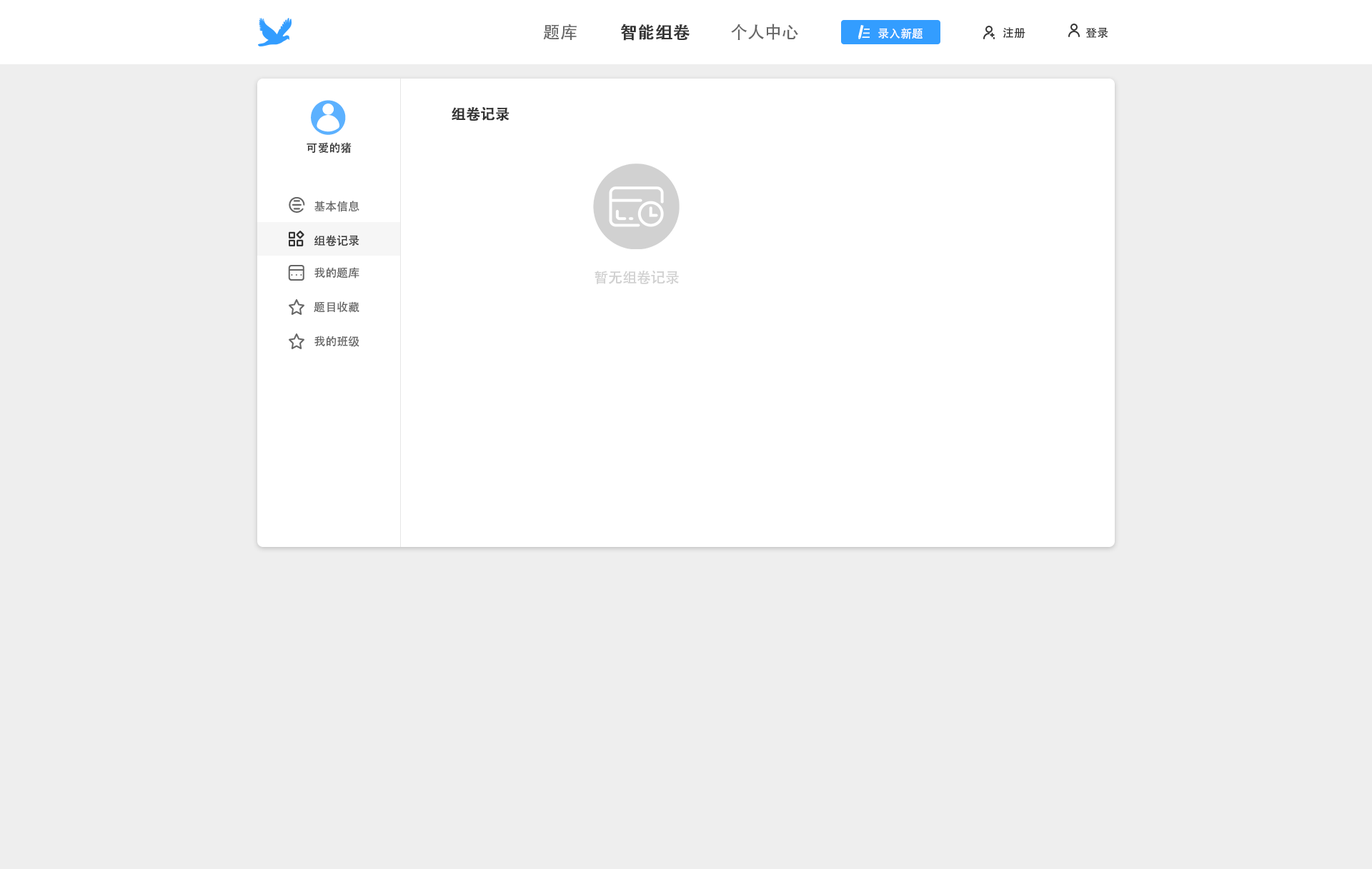
<style>
.page{position:relative;width:1372px;height:869px;background:#eeeeee}
.page>*{position:absolute;margin:0}
.t1{font:17.1px "AdobeHeitiStd-Regular";color:#666666}
.t2{font:17.1px "AdobeHeitiStd-Regular";color:#333333;font-weight:bold}
.t3{font:11.4px "AdobeHeitiStd-Regular";color:#ffffff}
.t4{font:11.4px "AdobeHeitiStd-Regular";color:#333333}
.t5{font:14.3px "AdobeHeitiStd-Regular";color:#333333;font-weight:bold}
.t6{font:11.4px "AdobeHeitiStd-Regular";color:#666666}
.t7{font:14.3px "AdobeHeitiStd-Regular";color:#d1d1d1}
</style>
<div class="page">
<p class="t1" style="left:543px;top:24px;width:33px;height:16px">题库</p>
<p class="t2" style="left:621px;top:24px;width:68px;height:17px">智能组卷</p>
<p class="t1" style="left:731px;top:24px;width:67px;height:16px">个人中心</p>
<p class="t3" style="left:878px;top:28px;width:44px;height:11px">录入新题</p>
<p class="t4" style="left:1002px;top:27px;width:23px;height:12px">注册</p>
<p class="t4" style="left:1085px;top:27px;width:23px;height:12px">登录</p>
<p class="t5" style="left:451px;top:106px;width:58px;height:15px">组卷记录</p>
<p class="t4" style="left:306px;top:142px;width:45px;height:12px">可爱的猪</p>
<p class="t6" style="left:314px;top:201px;width:45px;height:11px">基本信息</p>
<p class="t4" style="left:314px;top:235px;width:45px;height:11px">组卷记录</p>
<p class="t6" style="left:314px;top:267px;width:45px;height:12px">我的题库</p>
<p class="t7" style="left:594px;top:271px;width:85px;height:13px">暂无组卷记录</p>
<p class="t6" style="left:314px;top:301px;width:45px;height:12px">题目收藏</p>
<p class="t6" style="left:314px;top:336px;width:45px;height:11px">我的班级</p>
</div>
